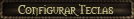
<style>
.page{position:relative;width:134px;height:19px}
.page>*{position:absolute;margin:0}
.t1{font:12px "Morpheus";color:#b8b27c}
</style>
<div class="page">
<p class="t1" style="left:18px;top:4px;width:96px;height:12px">Configurar Teclas</p>
</div>
